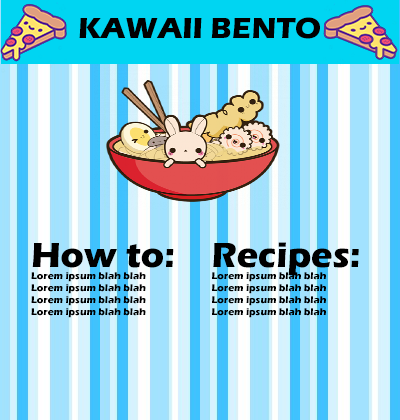
<style>
.page{position:relative;width:400px;height:420px}
.page>*{position:absolute;margin:0}
.t1{font:30px "ErasITC-Bold";color:#010000}
.t2{font:10px "ErasITC-Bold";color:#000000}
.t3{font:36px "ErasITC-Bold";color:#000000}
</style>
<div class="page">
<p class="t1" style="left:79px;top:17px;width:241px;height:22px">KAWAII BENTO</p>
<p class="t2" style="left:31px;top:243px;width:143px;height:75px"><span class="t3">How to:<br></span>Lorem ipsum blah blah<br>Lorem ipsum blah blah<br>Lorem ipsum blah blah<br>Lorem ipsum blah blah</p>
<p class="t2" style="left:212px;top:242px;width:147px;height:76px"><span class="t3">Recipes:<br></span>Lorem ipsum blah blah<br>Lorem ipsum blah blah<br>Lorem ipsum blah blah<br>Lorem ipsum blah blah</p>
</div>
